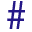
<style>
.page{position:relative;width:32px;height:32px;background:#ffffff}
.page>*{position:absolute;margin:0}
.t1{font:41.7px "MyriadPro-Regular";color:#241787}
</style>
<div class="page">
<p class="t1" style="left:7px;top:1px;width:18px;height:28px">#</p>
</div>
